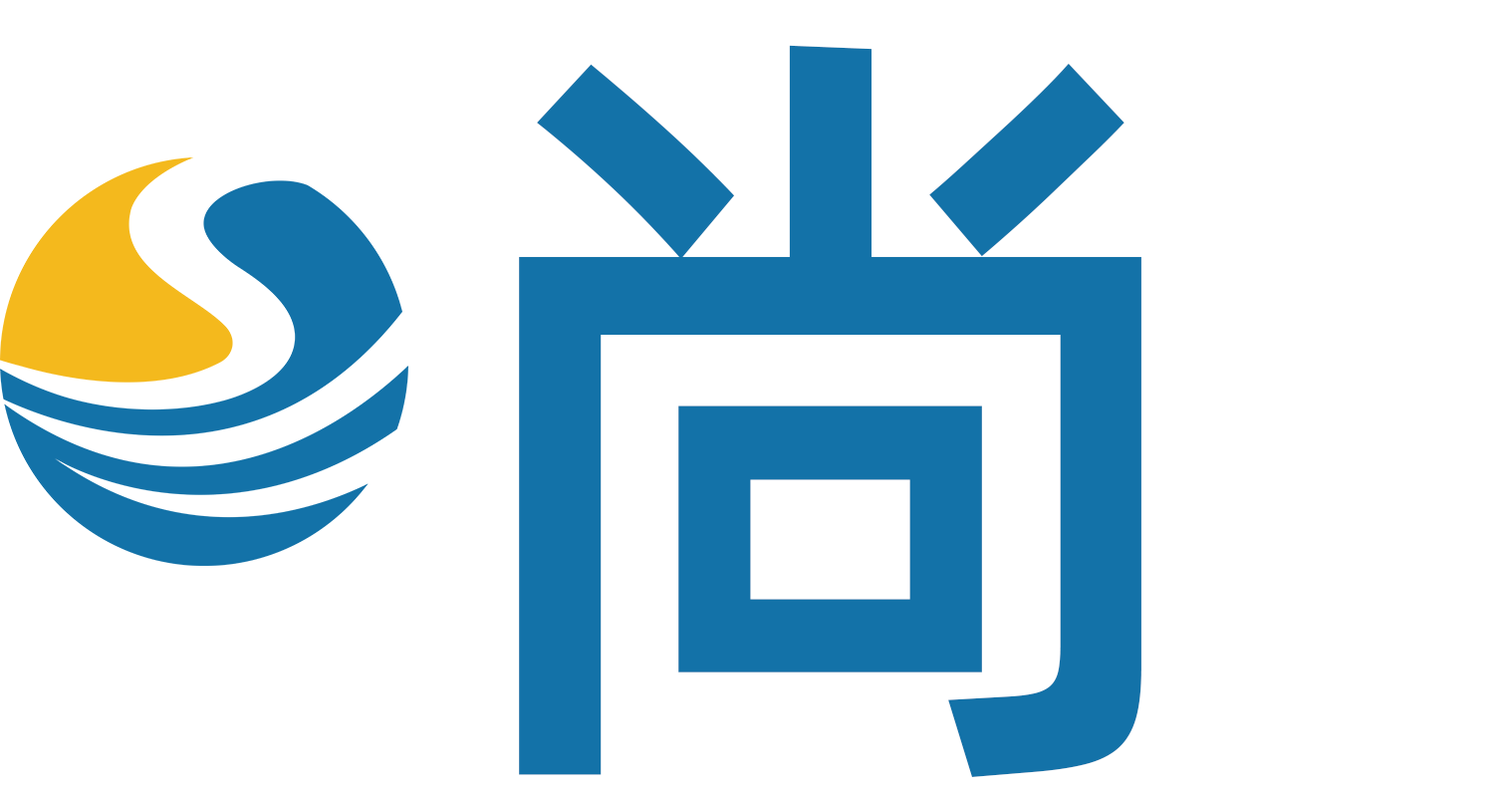
<style>
.page{position:relative;width:1496px;height:797px;background:#ffffff}
.page>*{position:absolute;margin:0}
.t1{font:818.4px "AlibabaPuHuiTi-Medium";letter-spacing:0.1em;color:#1372a8}
</style>
<div class="page">
<p class="t1" style="left:519px;top:45px;width:623px;height:732px">尚</p>
</div>
